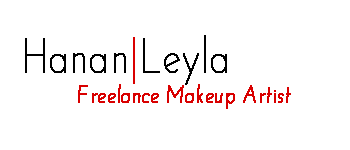
<style>
.page{position:relative;width:350px;height:150px;background:#ffffff}
.page>*{position:absolute;margin:0}
.t1{font:48.6px "JosefinSans-Thin";color:#000000;font-weight:bold;scale:0.8 1}
.t2{font:30.4px "JosefinSans-ThinItalic";color:#d90000;font-weight:bold;scale:0.8 1}
.t3{font:48.6px "JosefinSans-Thin";color:#d90000;font-weight:bold;scale:0.8 1}
.t4{font:24.3px "JosefinSans-ThinItalic";color:#d90000;font-weight:bold;scale:0.8 1}
</style>
<div class="page">
<p class="t1" style="left:25px;top:35px;width:202px;height:50px"><span class="t2"><br></span>Hanan<span class="t3">|</span>Leyla</p>
<p class="t4" style="left:78px;top:84px;width:213px;height:25px"><span class="t2"><br><br><br></span>Freelance Makeup Artist</p>
</div>
